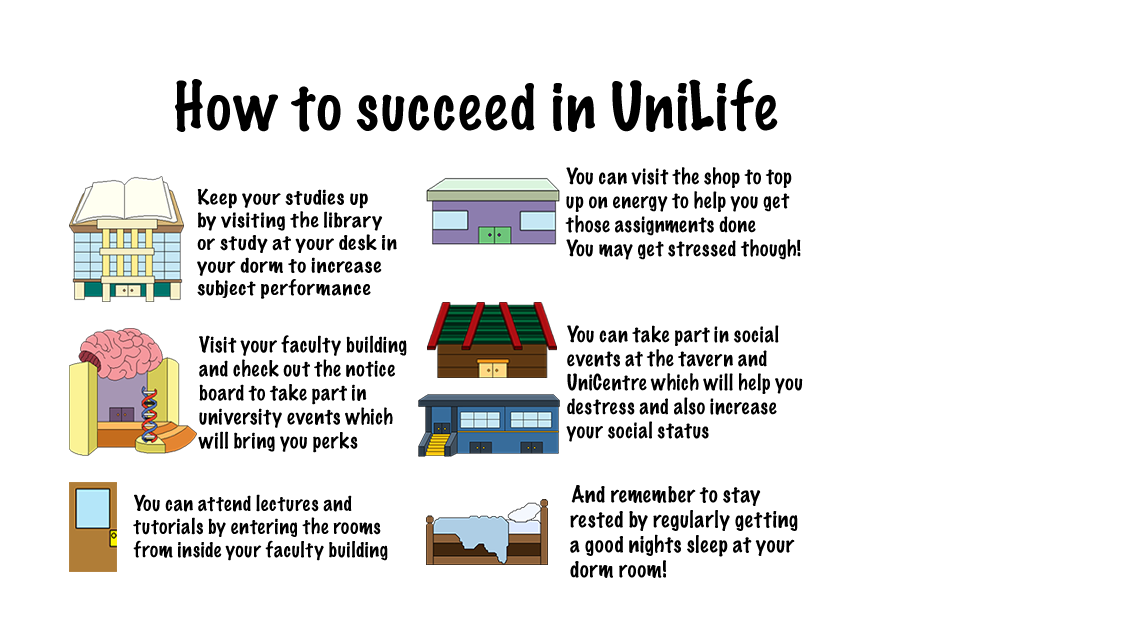
<style>
.page{position:relative;width:1136px;height:640px;background:#ffffff}
.page>*{position:absolute;margin:0}
.t1{font:60px "MarkerFelt-Thin";color:#000000}
.t2{font:20px "MarkerFelt-Thin";color:#000000}
.t3{font:18.9px "MarkerFelt-Thin";color:#000000;scale:1.12 1}
.t4{font:20.8px "MarkerFelt-Thin";color:#000000}
.t5{font:19.2px "MarkerFelt-Thin";color:#000000}
</style>
<div class="page">
<p class="t1" style="left:175px;top:78px;width:603px;height:54px">How to succeed in UniLife</p>
<p class="t2" style="left:565px;top:167px;width:236px;height:93px">You can visit the shop to top<br>up on energy to help you get<br>those assignments done<br>You may get stressed though!</p>
<p class="t3" style="left:197px;top:188px;width:200px;height:111px">Keep your studies up<br>by visiting the library<br>or study at your desk in<br>your dorm to increase<br>subject performance</p>
<p class="t2" style="left:566px;top:325px;width:237px;height:117px">You can take part in social <br>events at the tavern and <br>UniCentre which will help you <br>destress and also increase <br>your social status</p>
<p class="t2" style="left:198px;top:335px;width:209px;height:118px">Visit your faculty building<br>and check out the notice<br>board to take part in<br>university events which <br>will bring you perks</p>
<p class="t4" style="left:570px;top:485px;width:228px;height:93px">And remember to stay <br>rested by regularly getting <br>a good nights sleep at your <br>dorm room!</p>
<p class="t5" style="left:133px;top:494px;width:255px;height:67px">You can attend lectures and<br>tutorials by entering the rooms<br>from inside your faculty building</p>
</div>
